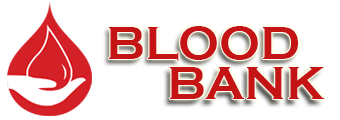
<style>
.page{position:relative;width:340px;height:120px;background:#ffffff}
.page>*{position:absolute;margin:0}
.t1{font:48px "CopperplateGothic-Bold";color:#c51414}
</style>
<div class="page">
<p class="t1" style="left:108px;top:26px;width:191px;height:35px">BLOOD</p>
<p class="t1" style="left:169px;top:67px;width:156px;height:32px">BANK</p>
</div>
